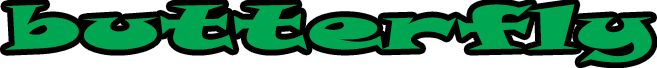
<style>
.page{position:relative;width:657px;height:68px;background:#00a651}
.page>*{position:absolute;margin:0}
.t1{font:60px "SnapITC-Regular";color:#00a651;scale:2 1}
</style>
<div class="page">
<p class="t1" style="left:5px;top:4px;width:647px;height:59px">butterfly</p>
</div>
